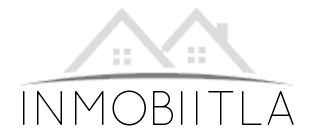
<style>
.page{position:relative;width:320px;height:140px;background:#ffffff}
.page>*{position:absolute;margin:0}
.t1{font:48.5px "QuicksandLight-Regular";color:#000000}
</style>
<div class="page">
<p class="t1" style="left:23px;top:90px;width:271px;height:36px">INMOBIITLA</p>
</div>
